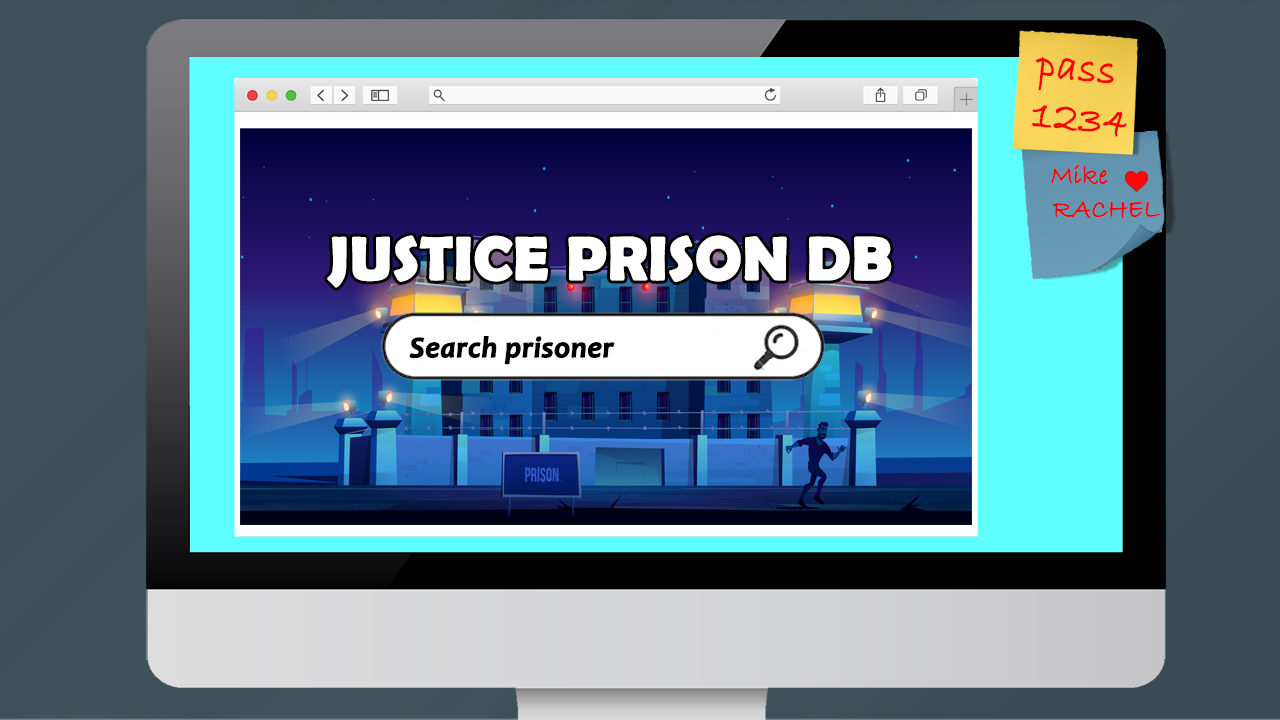
<style>
.page{position:relative;width:1280px;height:720px}
.page>*{position:absolute;margin:0}
.t1{font:41.6px "BradleyHandITC";color:#ff0000;font-weight:bold}
.t2{font:25.9px "BradleyHandITC";color:#ff0000;font-weight:bold}
.t3{font:61.1px "BerlinSansFBDemi-Bold";color:#ffffff;font-weight:bold}
.t4{font:29.7px "Candara-BoldItalic";color:#000000;font-weight:bold}
</style>
<div class="page">
<p class="t1" style="left:1032px;top:57px;width:95px;height:80px;rotate:5deg">pass<br>1234</p>
<p class="t2" style="left:1051px;top:164px;width:57px;height:21px">Mike</p>
<p class="t2" style="left:1052px;top:201px;width:109px;height:18px">RACHEL</p>
<p class="t3" style="left:327px;top:235px;width:565px;height:53px">JUSTICE PRISON DB</p>
<p class="t4" style="left:409px;top:336px;width:206px;height:29px">Search prisoner</p>
</div>
